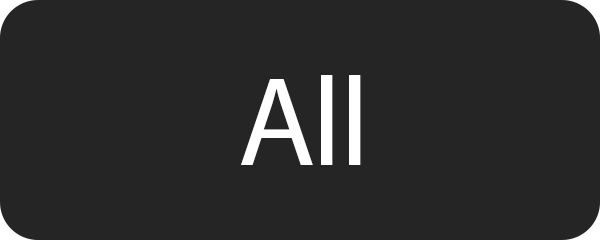
<style>
.page{position:relative;width:600px;height:240px;background:#252525}
.page>*{position:absolute;margin:0}
.t1{font:127px "MyriadPro-Regular";letter-spacing:-0.02em;color:#ffffff}
</style>
<div class="page">
<p class="t1" style="left:241px;top:75px;width:120px;height:90px">All</p>
</div>
